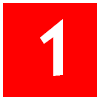
<style>
.page{position:relative;width:100px;height:100px;background:#ff0000}
.page>*{position:absolute;margin:0}
.t1{font:72px "ELEGANCE";color:#ffffff}
</style>
<div class="page">
<p class="t1" style="left:40px;top:19px;width:23px;height:57px">1</p>
</div>
